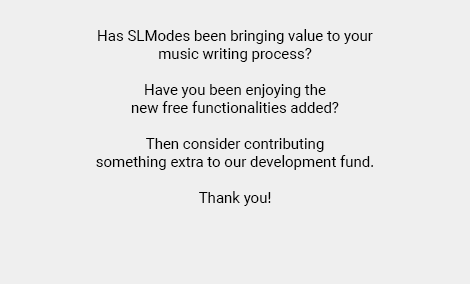
<style>
.page{position:relative;width:470px;height:284px;background:#efefef}
.page>*{position:absolute;margin:0}
.t1{font:15px "Roboto-Regular";color:#000000}
</style>
<div class="page">
<p class="t1" style="left:96px;top:29px;width:277px;height:177px;text-align:justify">Has SLModes been bringing value to your <br>music writing process?<br><br>Have you been enjoying the <br>new free functionalities added?<br><br>Then consider contributing <br>something extra to our development fund.<br><br>Thank you!</p>
</div>
